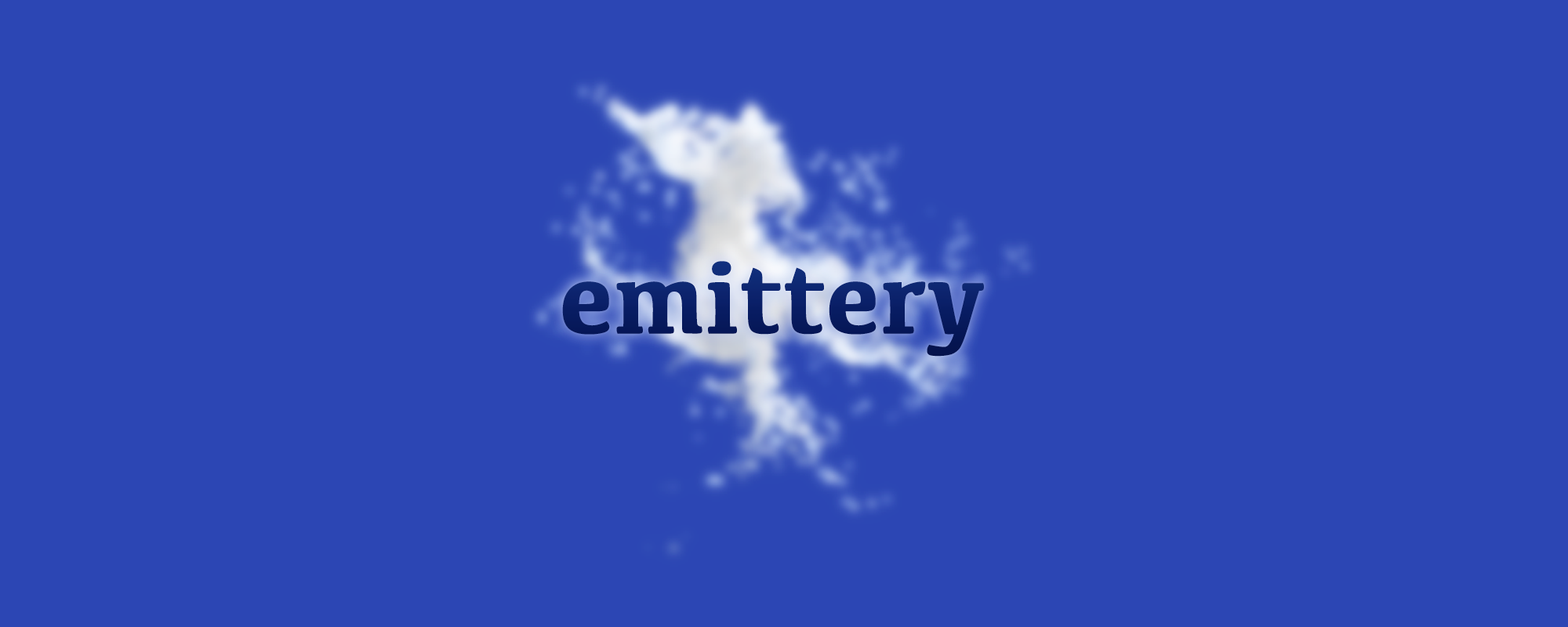
<style>
.page{position:relative;width:1568px;height:627px;background:#2c46b4}
.page>*{position:absolute;margin:0}
.t1{font:104.3px "Kefa-Bold";color:#06185b}
.t2{font:104.3px "Kefa-Bold";color:#182f63}
</style>
<div class="page">
<p class="t1" style="left:562px;top:261px;width:422px;height:96px">emittery</p>
<p class="t2" style="left:562px;top:261px;width:422px;height:96px;opacity:0.1">emittery</p>
</div>
